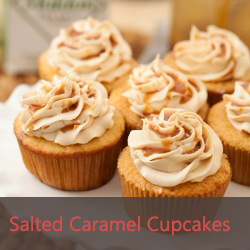
<style>
.page{position:relative;width:250px;height:250px}
.page>*{position:absolute;margin:0}
.t1{font:20px "MicrosoftTaiLe";color:#d64d4c}
</style>
<div class="page">
<p class="t1" style="left:10px;top:216px;width:220px;height:20px">Salted Caramel Cupcakes</p>
</div>
